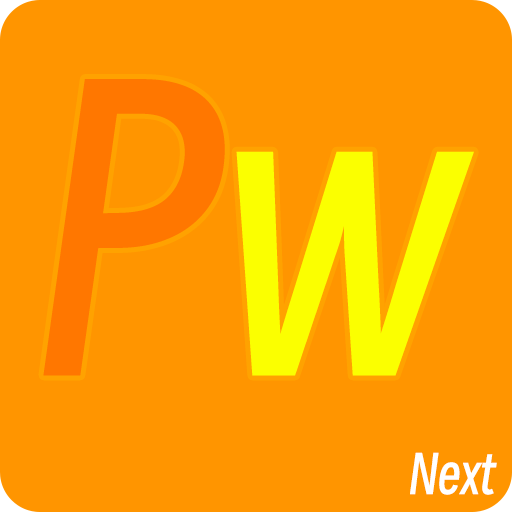
<style>
.page{position:relative;width:512px;height:512px;background:#ff9500}
.page>*{position:absolute;margin:0}
.t1{font:366.5px "SmileySans-Oblique";color:#ff7700}
.t2{font:366.5px "SmileySans-Oblique";color:#fbff00}
.t3{font:51px "SmileySans-Oblique";color:#ffffff}
</style>
<div class="page">
<p class="t1" style="left:43px;top:79px;width:431px;height:297px">P<span class="t2">w</span></p>
<p class="t3" style="left:410px;top:452px;width:87px;height:43px">Next</p>
</div>
